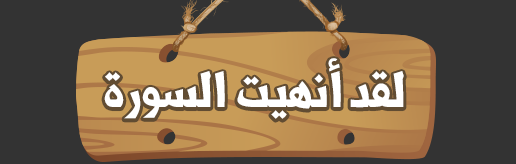
<style>
.page{position:relative;width:516px;height:164px;background:#333333}
.page>*{position:absolute;margin:0}
.t1{font:60px "Shorooq_N1";color:#ffffff}
</style>
<div class="page">
<p class="t1" style="left:104px;top:58px;width:300px;height:61px">لقد أنهيت السورة</p>
</div>
